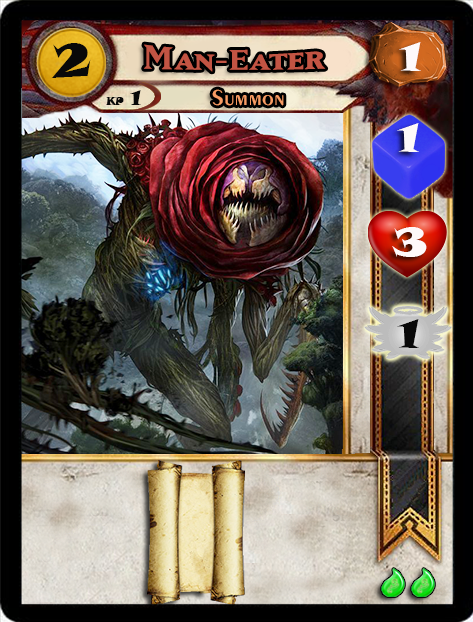
<style>
.page{position:relative;width:473px;height:622px}
.page>*{position:absolute;margin:0}
.t1{font:46.6px "SnapITC-Regular";color:#090909;scale:1.05 1}
.t2{font:40px "MatrixBoldSmallCaps";color:#c25443;scale:1.06 1}
.t3{font:40px "SnapITC-Regular";color:#fef9f9;scale:1.05 1}
.t4{font:22.7px "Exotic350BT-DemiBold";color:#f89c64;scale:1.06 1}
.t5{font:20.5px "SnapITC-Regular";color:#090909}
.t6{font:40px "SnapITC-Regular";color:#090909;scale:1.05 1}
</style>
<div class="page">
<p class="t1" style="left:51px;top:43px;width:40px;height:35px">2</p>
<p class="t2" style="left:144px;top:44px;width:182px;height:28px">Man-Eater</p>
<p class="t3" style="left:399px;top:42px;width:22px;height:29px">1</p>
<p class="t4" style="left:212px;top:89px;width:72px;height:17px">Summon</p>
<p class="t5" style="left:130px;top:90px;width:11px;height:15px">1</p>
<p class="t3" style="left:397px;top:123px;width:22px;height:29px">1</p>
<p class="t3" style="left:392px;top:227px;width:35px;height:30px">3</p>
<p class="t6" style="left:397px;top:319px;width:22px;height:29px">1</p>
</div>
